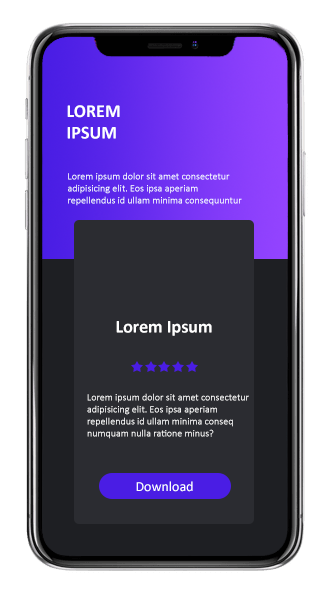
<style>
.page{position:relative;width:332px;height:600px;background:#2b2c31}
.page>*{position:absolute;margin:0}
.t1{font:18px "Calibri-Bold";color:#ffffff}
.t2{font:10px "Calibri";color:#ffffff}
.t3{font:14px "Calibri";color:#ffffff}
</style>
<div class="page">
<p class="t1" style="left:67px;top:105px;width:53px;height:34px">LOREM<br>IPSUM</p>
<p class="t2" style="left:68px;top:172px;width:174px;height:34px">Lorem ipsum dolor sit amet consectetur<br>adipisicing elit. Eos ipsa aperiam<br>repellendus id ullam minima consequuntur</p>
<p class="t1" style="left:116px;top:321px;width:96px;height:15px">Lorem Ipsum</p>
<p class="t2" style="left:87px;top:393px;width:162px;height:46px">Lorem ipsum dolor sit amet consectetur<br>adipisicing elit. Eos ipsa aperiam<br>repellendus id ullam minima conseq<br>numquam nulla ratione minus?</p>
<p class="t3" style="left:136px;top:481px;width:57px;height:11px">Download</p>
</div>
